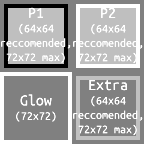
<style>
.page{position:relative;width:144px;height:144px;background:#808080}
.page>*{position:absolute;margin:0}
.t1{font:12px "UbuntuMono-Regular";color:#ffffff}
.t2{font:16px "UbuntuMono-Regular";color:#ffffff}
</style>
<div class="page">
<p class="t1" style="left:1px;top:7px;width:70px;height:57px;text-align:center"><span class="t2">P1<br></span>(64x64<br>reccomended,<br>72x72 max)</p>
<p class="t1" style="left:73px;top:7px;width:70px;height:57px;text-align:center"><span class="t2">P2<br></span>(64x64<br>reccomended,<br>72x72 max)</p>
<p class="t1" style="left:73px;top:80px;width:70px;height:56px;text-align:center"><span class="t2">Extra<br></span>(64x64<br>reccomended,<br>72x72 max)</p>
<p class="t1" style="left:16px;top:94px;width:40px;height:28px;text-align:center"><span class="t2">Glow<br></span>(72x72)</p>
</div>
